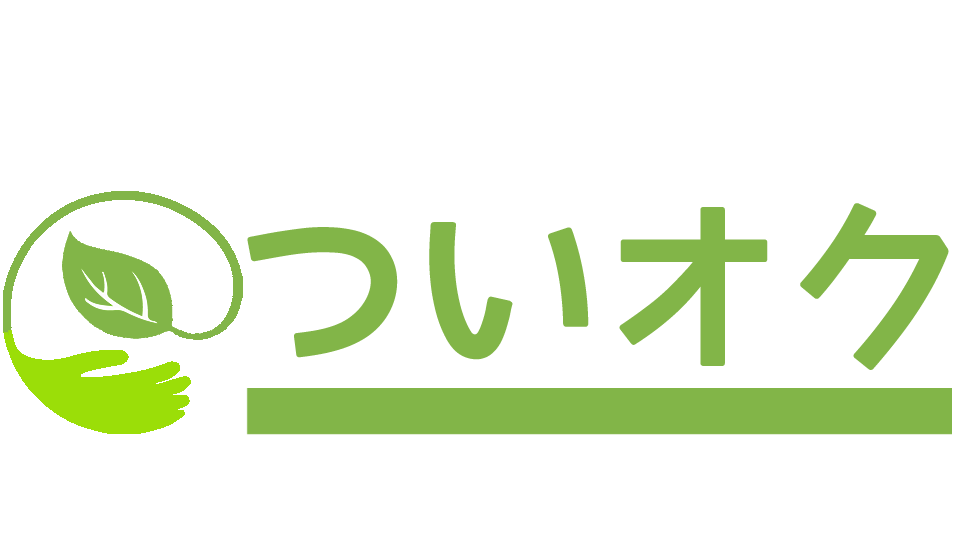
<style>
.page{position:relative;width:960px;height:560px;background:#ffffff}
.page>*{position:absolute;margin:0}
.t1{font:175px "07YasashisaGothicBold";letter-spacing:0.025em;color:#82b548;font-weight:bold}
</style>
<div class="page">
<p class="t1" style="left:247px;top:203px;width:702px;height:167px">ついオク</p>
</div>
